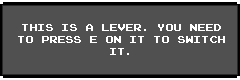
<style>
.page{position:relative;width:240px;height:80px;background:#515050}
.page>*{position:absolute;margin:0}
.t1{font:10px "JoystixMonospace-Regular";color:#ffffff}
</style>
<div class="page">
<p class="t1" style="left:18px;top:24px;width:207px;height:31px;text-align:center">This is a lever. you need<br>to press e on it to switch<br>it.</p>
</div>
